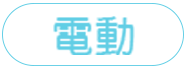
<style>
.page{position:relative;width:185px;height:68px;background:#ffffff}
.page>*{position:absolute;margin:0}
.t1{font:41.4px "DFYuan-W5-WIN-BF";color:#61cee5}
</style>
<div class="page">
<p class="t1" style="left:53px;top:16px;width:82px;height:39px">電動</p>
</div>
